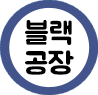
<style>
.page{position:relative;width:98px;height:95px;background:#ffffff}
.page>*{position:absolute;margin:0}
.t1{font:30px/30px "BMJUA";color:#000000}
</style>
<div class="page">
<p class="t1" style="left:25px;top:20px;width:49px;height:55px;text-align:center">블랙<br>공장</p>
</div>
